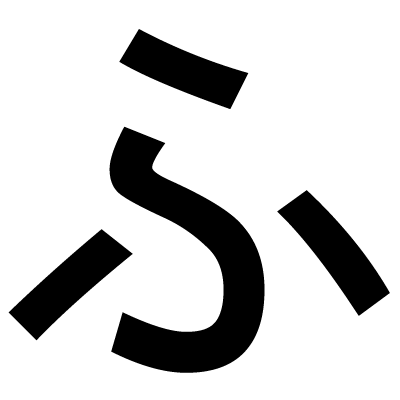
<style>
.page{position:relative;width:400px;height:400px;background:#ffffff}
.page>*{position:absolute;margin:0}
.t1{font:416.7px "MS-PGothic";color:#000000}
</style>
<div class="page">
<p class="t1" style="left:8px;top:29px;width:382px;height:344px">ふ</p>
</div>
